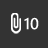
<style>
.page{position:relative;width:48px;height:48px;background:#333333}
.page>*{position:absolute;margin:0}
.t1{font:16px "SegoeWP-Semibold";letter-spacing:-0.01em;color:#ffffff}
</style>
<div class="page">
<p class="t1" style="left:24px;top:17px;width:15px;height:13px">10</p>
</div>
